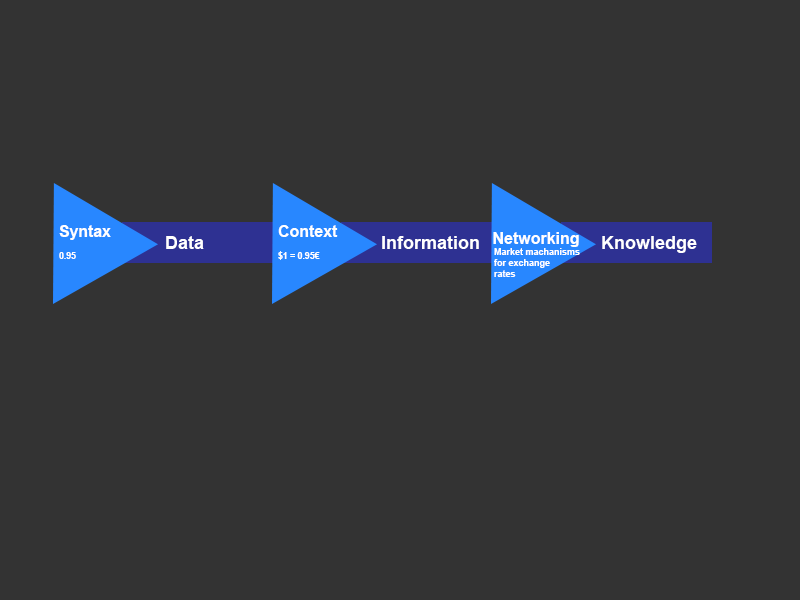
<style>
.page{position:relative;width:800px;height:600px;background:#333333}
.page>*{position:absolute;margin:0}
.t1{font:16.5px "Arial-BoldMT";color:#ffffff;scale:0.96 1}
.t2{font:9px "Arial-BoldMT";color:#ffffff;scale:0.96 1}
.t3{font:9px "Arial-BoldMT";color:#ffffff;scale:0.97 1}
.t4{font:16.5px "Arial-BoldMT";color:#ffffff;scale:0.97 1}
.t5{font:18px "Arial-BoldMT";color:#ffffff}
.t6{font:9px "Arial-BoldMT";color:#ffffff}
</style>
<div class="page">
<p class="t1" style="left:59px;top:225px;width:52px;height:34px">Syntax<br><span class="t2"><br>0.95</span></p>
<p class="t3" style="left:278px;top:225px;width:60px;height:35px"><span class="t4">Context<br></span><br>$1 = 0.95€</p>
<p class="t4" style="left:493px;top:232px;width:86px;height:15px">Networking</p>
<p class="t5" style="left:166px;top:236px;width:38px;height:13px">Data</p>
<p class="t5" style="left:382px;top:236px;width:97px;height:13px">Information</p>
<p class="t5" style="left:602px;top:236px;width:95px;height:17px">Knowledge</p>
<p class="t6" style="left:494px;top:248px;width:86px;height:29px">Market machanisms<br>for exchange<br>rates</p>
</div>
